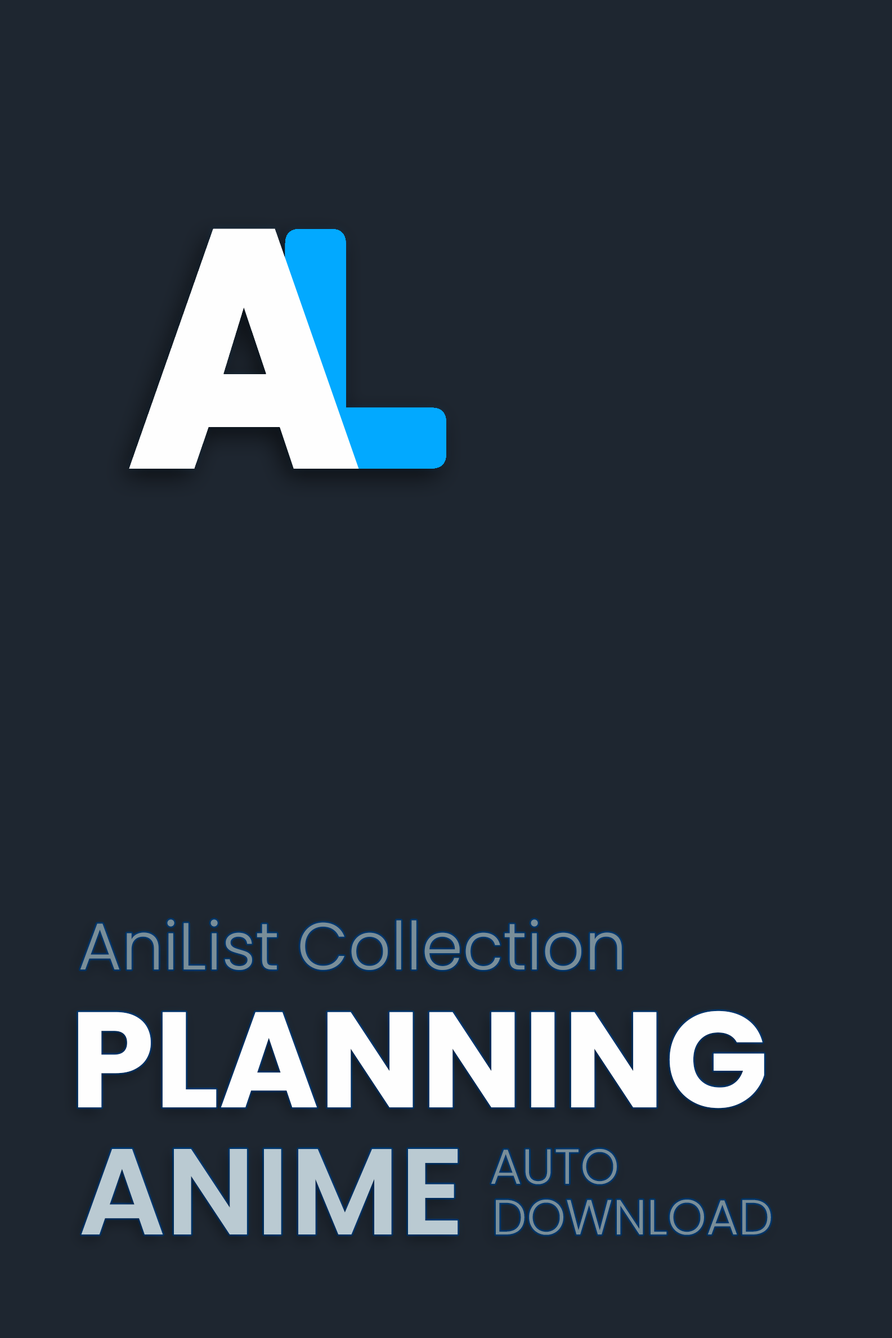
<style>
.page{position:relative;width:892px;height:1338px;background:#1e2630}
.page>*{position:absolute;margin:0}
.t1{font:66.3px "Poppins-Light";color:#798e99}
.t2{font:135.6px "Poppins-Bold";color:#fefefe}
.t3{font:122.3px "Poppins-SemiBold";color:#bacad2;text-transform:uppercase}
.t4{font:49.4px "Poppins-Light";color:#798e99;text-transform:uppercase}
</style>
<div class="page">
<p class="t1" style="left:80px;top:919px;width:542px;height:51px">AniList Collection</p>
<p class="t2" style="left:78px;top:1010px;width:686px;height:98px">PLANNING</p>
<p class="t3" style="left:81px;top:1149px;width:377px;height:85px">anime</p>
<p class="t4" style="left:490px;top:1149px;width:126px;height:35px">Auto</p>
<p class="t4" style="left:496px;top:1199px;width:275px;height:36px">Download</p>
</div>
